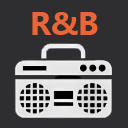
<style>
.page{position:relative;width:128px;height:128px;background:#2e2d30}
.page>*{position:absolute;margin:0}
.t1{font:32px "Leelawadee-Bold";color:#ec6635}
</style>
<div class="page">
<p class="t1" style="left:32px;top:12px;width:66px;height:23px">R&amp;B</p>
</div>
